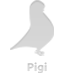
<style>
.page{position:relative;width:70px;height:73px;background:#ffffff}
.page>*{position:absolute;margin:0}
.t1{font:11.3px "Ubuntu-Bold";color:#d8d8d8}
</style>
<div class="page">
<p class="t1" style="left:27px;top:62px;width:20px;height:12px">Pigi</p>
</div>
